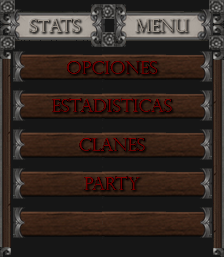
<style>
.page{position:relative;width:224px;height:257px;background:#161616}
.page>*{position:absolute;margin:0}
.t1{font:18px "PerpetuaTitlingMT-Light";color:#6c0000}
.t2{font:18px "PerpetuaTitlingMT-Light";color:#6d0000}
.t3{font:18px "PerpetuaTitlingMT-Light";color:#6f0000}
</style>
<div class="page">
<p class="t1" style="left:67px;top:61px;width:91px;height:13px">OPCIONES</p>
<p class="t2" style="left:52px;top:98px;width:120px;height:14px">Estadisticas</p>
<p class="t3" style="left:79px;top:138px;width:66px;height:13px">clanes</p>
<p class="t3" style="left:84px;top:176px;width:56px;height:14px">Party</p>
</div>
